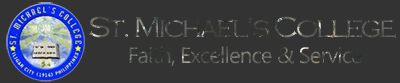
<style>
.page{position:relative;width:400px;height:83px;background:#333333}
.page>*{position:absolute;margin:0}
.t1{font:30px "CopperplateGothic-Light";letter-spacing:-0.08em}
.t2{font:22.2px "MicrosoftTaiLe";letter-spacing:-0.04em}
</style>
<div class="page">
<p class="t1" style="left:89px;top:16px;width:307px;height:22px">St. Michael’s College</p>
<p class="t2" style="left:129px;top:46px;width:233px;height:20px">Faith, Excellence &amp; Service</p>
</div>
